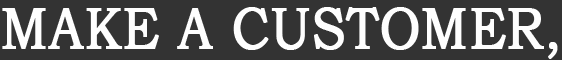
<style>
.page{position:relative;width:562px;height:60px;background:#333333}
.page>*{position:absolute;margin:0}
.t1{font:57.8px "BookmanOldStyle";color:#fefefe;text-transform:uppercase;font-weight:bold;scale:0.88 1}
</style>
<div class="page">
<p class="t1" style="left:2px;top:7px;width:556px;height:52px">Make a customer,</p>
</div>
